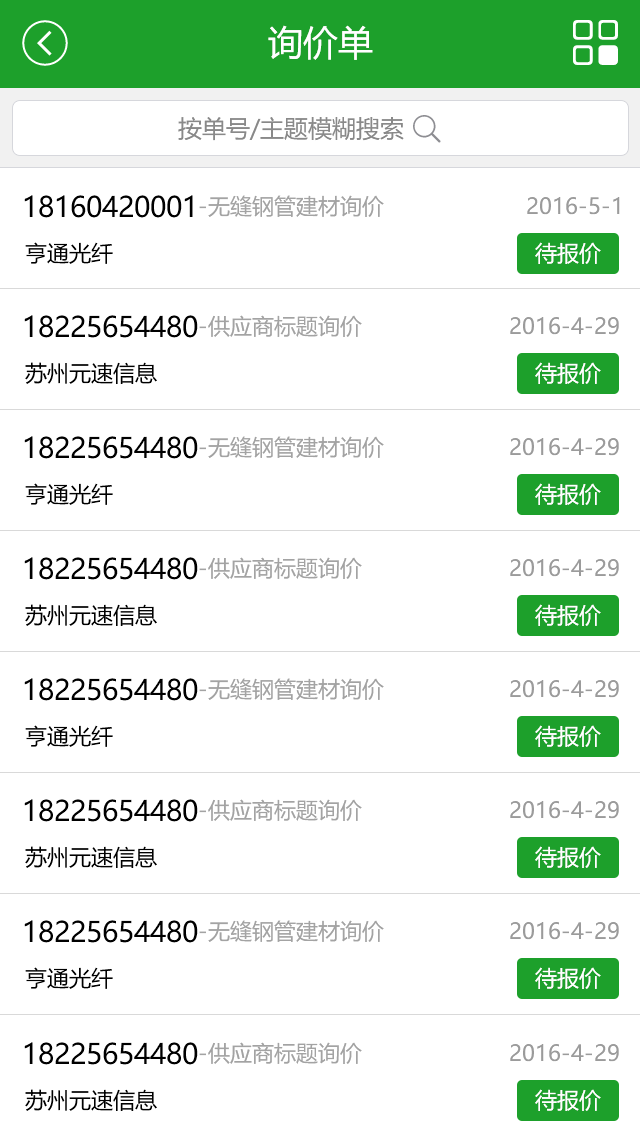
<style>
.page{position:relative;width:640px;height:1136px;background:#ffffff}
.page>*{position:absolute;margin:0}
.t1{font:35px "MicrosoftYaHei";color:#ffffff}
.t2{font:24px "MicrosoftYaHei";color:#898989}
.t3{font:28px "MicrosoftYaHei";color:#000000}
.t4{font:22px "MicrosoftYaHei";color:#a3a3a3}
.t5{font:22px "MicrosoftYaHei";color:#9b9b9b}
.t6{font:22px "MicrosoftYaHei";color:#000000}
.t7{font:22px "MicrosoftYaHei";color:#ffffff}
</style>
<div class="page">
<p class="t1" style="left:268px;top:25px;width:105px;height:35px">询价单</p>
<p class="t2" style="left:178px;top:117px;width:226px;height:24px">按单号/主题模糊搜索</p>
<p class="t3" style="left:24px;top:195px;width:169px;height:23px">18160420001</p>
<p class="t4" style="left:199px;top:195px;width:185px;height:22px">-无缝钢管建材询价</p>
<p class="t5" style="left:527px;top:197px;width:93px;height:18px">2016-5-1</p>
<p class="t6" style="left:25px;top:242px;width:88px;height:22px">亨通光纤</p>
<p class="t7" style="left:535px;top:242px;width:66px;height:22px">待报价</p>
<p class="t3" style="left:24px;top:315px;width:174px;height:23px">18225654480</p>
<p class="t4" style="left:199px;top:315px;width:163px;height:22px">-供应商标题询价</p>
<p class="t5" style="left:510px;top:317px;width:109px;height:18px">2016-4-29</p>
<p class="t6" style="left:25px;top:362px;width:132px;height:22px">苏州元速信息</p>
<p class="t7" style="left:535px;top:362px;width:66px;height:22px">待报价</p>
<p class="t3" style="left:24px;top:436px;width:174px;height:23px">18225654480</p>
<p class="t4" style="left:199px;top:436px;width:185px;height:22px">-无缝钢管建材询价</p>
<p class="t5" style="left:510px;top:438px;width:109px;height:18px">2016-4-29</p>
<p class="t6" style="left:25px;top:483px;width:88px;height:22px">亨通光纤</p>
<p class="t7" style="left:535px;top:483px;width:66px;height:22px">待报价</p>
<p class="t3" style="left:24px;top:557px;width:174px;height:23px">18225654480</p>
<p class="t4" style="left:199px;top:557px;width:163px;height:22px">-供应商标题询价</p>
<p class="t5" style="left:510px;top:559px;width:109px;height:18px">2016-4-29</p>
<p class="t6" style="left:25px;top:604px;width:132px;height:22px">苏州元速信息</p>
<p class="t7" style="left:535px;top:604px;width:66px;height:22px">待报价</p>
<p class="t3" style="left:24px;top:678px;width:174px;height:23px">18225654480</p>
<p class="t4" style="left:199px;top:678px;width:185px;height:22px">-无缝钢管建材询价</p>
<p class="t5" style="left:510px;top:680px;width:109px;height:18px">2016-4-29</p>
<p class="t6" style="left:25px;top:725px;width:88px;height:22px">亨通光纤</p>
<p class="t7" style="left:535px;top:725px;width:66px;height:22px">待报价</p>
<p class="t3" style="left:24px;top:799px;width:174px;height:23px">18225654480</p>
<p class="t4" style="left:199px;top:799px;width:163px;height:22px">-供应商标题询价</p>
<p class="t5" style="left:510px;top:801px;width:109px;height:18px">2016-4-29</p>
<p class="t6" style="left:25px;top:846px;width:132px;height:22px">苏州元速信息</p>
<p class="t7" style="left:535px;top:846px;width:66px;height:22px">待报价</p>
<p class="t3" style="left:24px;top:920px;width:174px;height:23px">18225654480</p>
<p class="t4" style="left:199px;top:920px;width:185px;height:22px">-无缝钢管建材询价</p>
<p class="t5" style="left:510px;top:922px;width:109px;height:18px">2016-4-29</p>
<p class="t6" style="left:25px;top:967px;width:88px;height:22px">亨通光纤</p>
<p class="t7" style="left:535px;top:967px;width:66px;height:22px">待报价</p>
<p class="t3" style="left:24px;top:1042px;width:174px;height:23px">18225654480</p>
<p class="t4" style="left:199px;top:1042px;width:163px;height:22px">-供应商标题询价</p>
<p class="t5" style="left:510px;top:1044px;width:109px;height:18px">2016-4-29</p>
<p class="t6" style="left:25px;top:1089px;width:132px;height:22px">苏州元速信息</p>
<p class="t7" style="left:535px;top:1089px;width:66px;height:22px">待报价</p>
</div>
